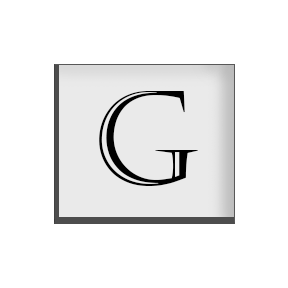
<style>
.page{position:relative;width:288px;height:288px;background:#ffffff}
.page>*{position:absolute;margin:0}
.t1{font:130px "Castellar";color:#000000}
</style>
<div class="page">
<p class="t1" style="left:99px;top:91px;width:99px;height:95px">G</p>
</div>
